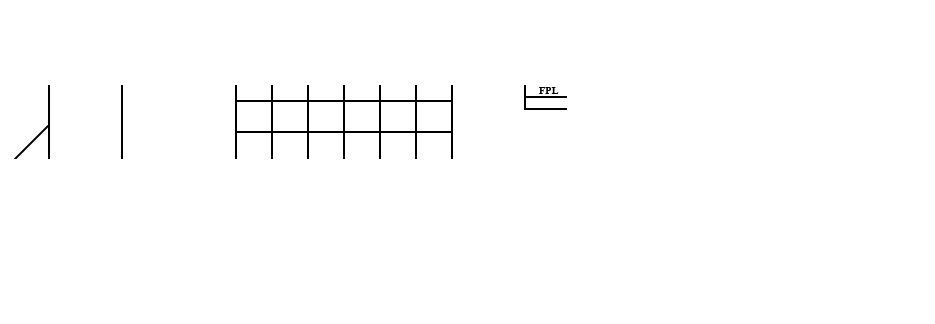
<style>
.page{position:relative;width:935px;height:324px;background:#ffffff}
.page>*{position:absolute;margin:0}
.t1{font:10px "TimesNewRomanPS-BoldMT";color:#000000;text-transform:uppercase}
</style>
<div class="page">
<p class="t1" style="left:539px;top:87px;width:20px;height:7px">FPL</p>
</div>
